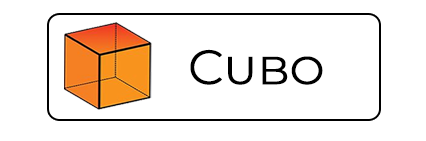
<style>
.page{position:relative;width:426px;height:141px;background:#ffffff}
.page>*{position:absolute;margin:0}
.t1{font:48.6px "Montserrat-Regular";color:#000000;font-variant:small-caps;scale:1.04 1}
</style>
<div class="page">
<p class="t1" style="left:190px;top:49px;width:133px;height:36px">Cubo</p>
</div>
